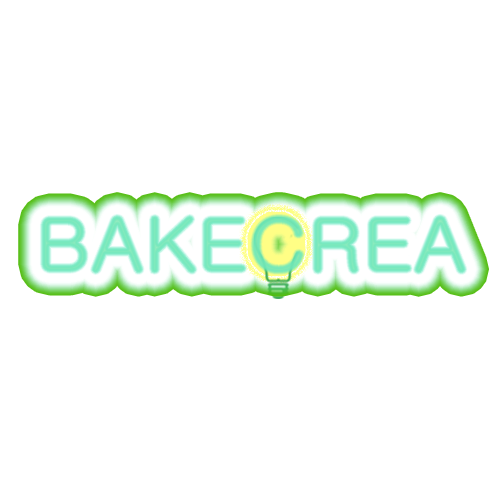
<style>
.page{position:relative;width:500px;height:500px;background:#ffffff}
.page>*{position:absolute;margin:0}
.t1{font:72px "Gulim";color:#7ae9be;font-weight:bold;scale:1.1 1}
</style>
<div class="page">
<p class="t1" style="left:42px;top:216px;width:423px;height:57px">BAKECREA</p>
</div>
